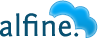
<style>
.page{position:relative;width:98px;height:38px;background:#ffffff}
.page>*{position:absolute;margin:0}
.t1{font:30px "FontinSans-Regular";color:#085071}
</style>
<div class="page">
<p class="t1" style="left:0px;top:13px;width:79px;height:24px">alfine.</p>
</div>
